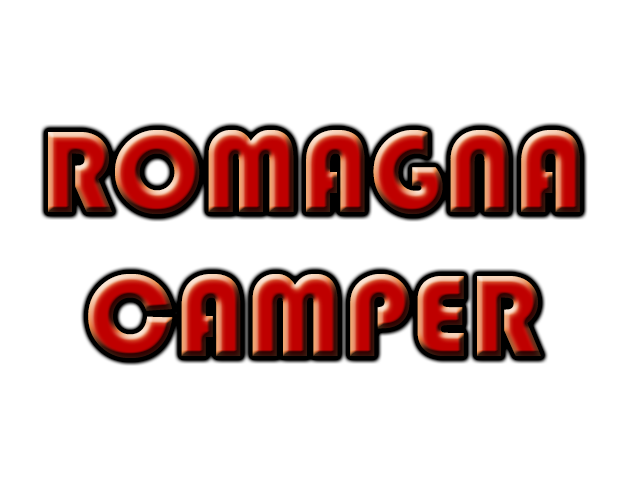
<style>
.page{position:relative;width:640px;height:480px;background:#ffffff}
.page>*{position:absolute;margin:0}
.t1{font:120px "Bauhaus93"}
</style>
<div class="page">
<p class="t1" style="left:48px;top:130px;width:532px;height:228px;text-align:center">ROMAGNA<br>CAMPER</p>
</div>
